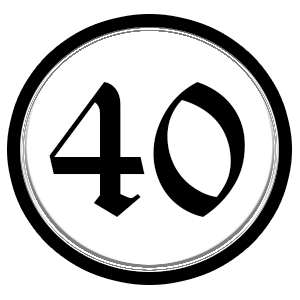
<style>
.page{position:relative;width:300px;height:300px;background:#ffffff}
.page>*{position:absolute;margin:0}
.t1{font:200px "OldEnglishTextMT";color:#000000}
</style>
<div class="page">
<p class="t1" style="left:49px;top:82px;width:196px;height:135px">40</p>
</div>
